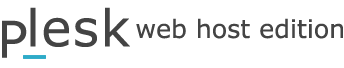
<style>
.page{position:relative;width:344px;height:68px;background:#ffffff}
.page>*{position:absolute;margin:0}
.t1{font:50.6px "MSReferenceSansSerif";letter-spacing:0.025em;color:#444444}
.t2{font:25.3px "MSReferenceSansSerif";color:#444444}
</style>
<div class="page">
<p class="t1" style="left:30px;top:7px;width:100px;height:40px">lesk</p>
<p class="t1" style="left:2px;top:20px;width:25px;height:38px">P</p>
<p class="t2" style="left:136px;top:18px;width:207px;height:21px">web host edition</p>
</div>
